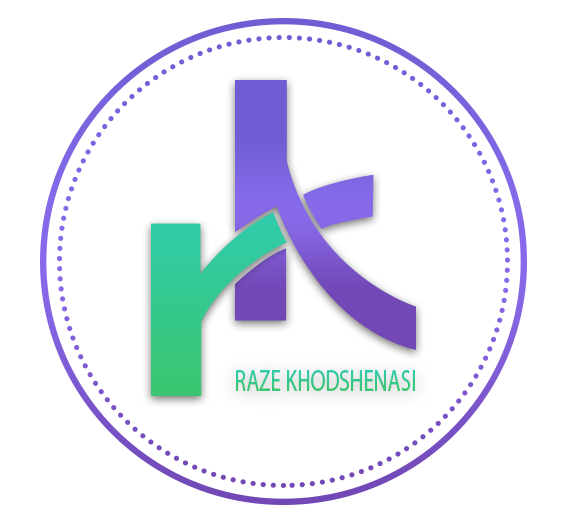
<style>
.page{position:relative;width:567px;height:522px;background:#ffffff}
.page>*{position:absolute;margin:0}
.t1{font:30.6px "MyriadHebrew-Regular";scale:0.69 1}
</style>
<div class="page">
<p class="t1" style="left:236px;top:370px;width:179px;height:21px">RAZE KHODSHENASI</p>
</div>
